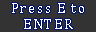
<style>
.page{position:relative;width:96px;height:32px;background:#333333}
.page>*{position:absolute;margin:0}
.t1{font:14px/16px "CambriaMath";letter-spacing:0.12em;color:#ffffff}
</style>
<div class="page">
<p class="t1" style="left:12px;top:3px;width:72px;height:26px;text-align:center">Press E to<br>ENTER</p>
</div>
